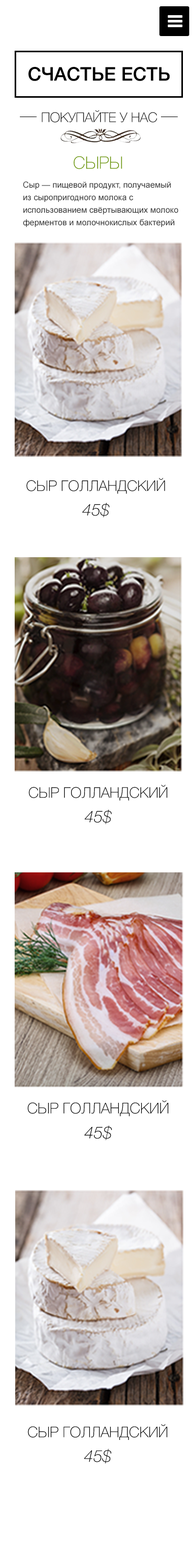
<style>
.page{position:relative;width:196px;height:1568px;background:#ffffff}
.page>*{position:absolute;margin:0}
.t1{font:18.8px "HelveticaNeueCyr-Medium";color:#000000;text-transform:uppercase}
.t2{font:13.5px "HelveticaNeueCyr-Thin";color:#000000;text-transform:uppercase}
.t3{font:17.2px "HelveticaNeueCyr-Thin";color:#649004;text-transform:uppercase}
.t4{font:8.4px/12.5px "ArialMT";color:#383838}
.t5{font:9.4px/15.7px "TimesNewRomanPSMT";color:#383838}
.t6{font:14.6px/24.5px "HelveticaNeueCyr-Thin";color:#000000;text-transform:uppercase}
.t7{font:16.3px/24.5px "HelveticaNeueCyr-ThinItalic";color:#000000;text-transform:uppercase}
.t8{font:14.9px/24.9px "HelveticaNeueCyr-Thin";color:#000000;text-transform:uppercase}
.t9{font:16.6px/24.9px "HelveticaNeueCyr-ThinItalic";color:#000000;text-transform:uppercase}
.t10{font:14.7px/24.6px "HelveticaNeueCyr-Thin";color:#000000;text-transform:uppercase}
.t11{font:16.4px/24.6px "HelveticaNeueCyr-ThinItalic";color:#000000;text-transform:uppercase}
</style>
<div class="page">
<p class="t1" style="left:28px;top:67px;width:142px;height:14px">счастье есть</p>
<p class="t2" style="left:42px;top:110px;width:115px;height:12px">Покупайте у нас</p>
<p class="t3" style="left:74px;top:156px;width:48px;height:13px">сыры</p>
<p class="t4" style="left:23px;top:181px;width:155px;height:46px"><span class="t5"><br></span>Сыр — пищевой продукт, получаемый <br>из сыропригодного молока с <br>использованием свёртывающих молоко <br>ферментов и молочнокислых бактерий</p>
<p class="t6" style="left:26px;top:478px;width:139px;height:39px;text-align:center">сыр голландский <span class="t7">45$</span></p>
<p class="t6" style="left:29px;top:785px;width:138px;height:39px;text-align:center">сыр голландский <span class="t7">45$</span></p>
<p class="t8" style="left:28px;top:1100px;width:140px;height:40px;text-align:center">сыр голландский <span class="t9">45$</span></p>
<p class="t10" style="left:28px;top:1424px;width:139px;height:39px;text-align:center">сыр голландский <span class="t11">45$</span></p>
</div>
